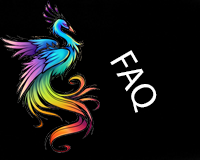
<style>
.page{position:relative;width:200px;height:160px;background:#000000}
.page>*{position:absolute;margin:0}
.t1{font:36px "MyriadPro-Regular";color:#ffffff}
</style>
<div class="page">
<p class="t1" style="left:110px;top:50px;width:47px;height:63px;rotate:60deg">FAQ</p>
</div>
